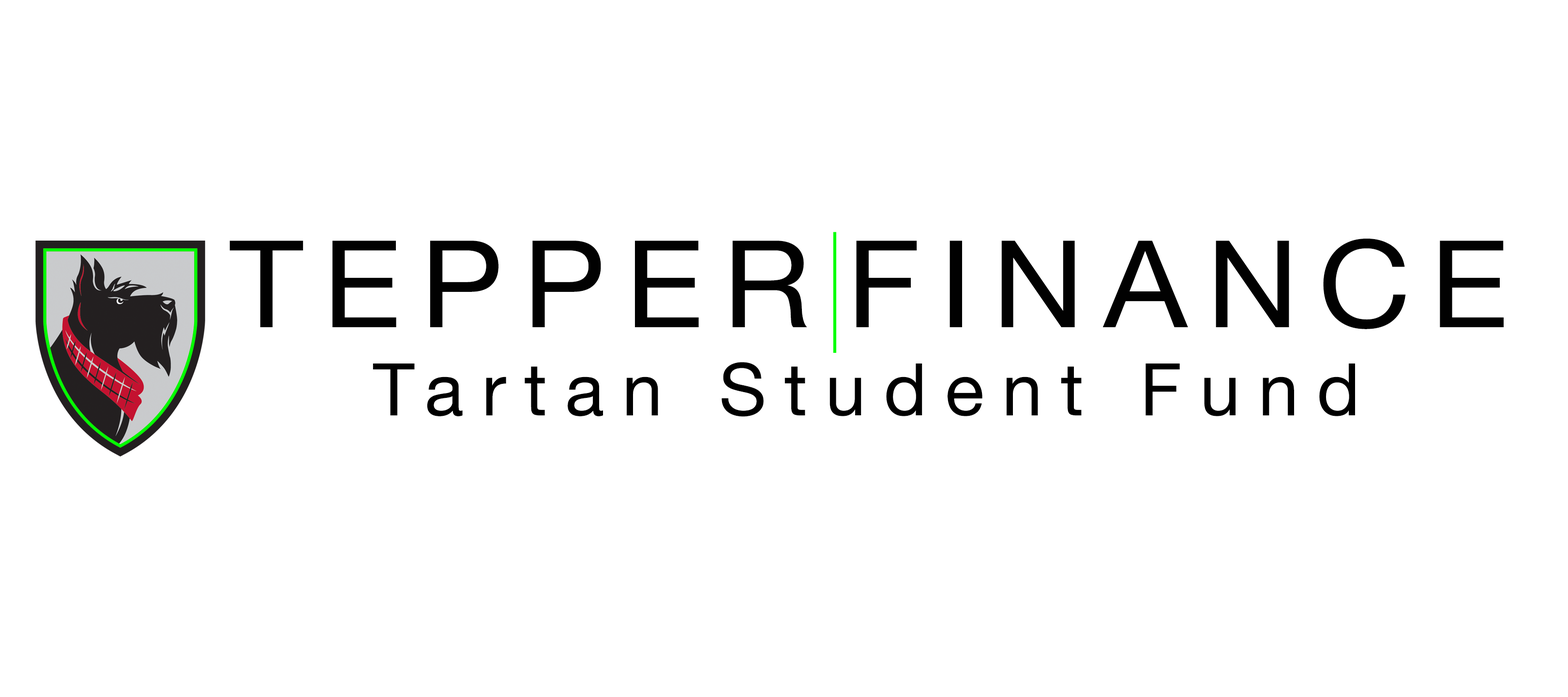
<style>
.page{position:relative;width:1568px;height:697px;background:#ffffff}
.page>*{position:absolute;margin:0}
.t1{font:121px "HelveticaNeue";letter-spacing:0.15em;color:#010101;scale:1.06 1}
.t2{font:121px "HelveticaNeue";letter-spacing:0.15em;color:#00ff00;scale:0.37 1}
.t3{font:72.6px "HelveticaNeue";letter-spacing:0.25em;color:#000000}
</style>
<div class="page">
<p class="t1" style="left:229px;top:232px;width:1275px;height:121px">TEPPER<span class="t2">|</span>FINANCE</p>
<p class="t3" style="left:373px;top:362px;width:982px;height:55px">Tartan Student Fund</p>
</div>
